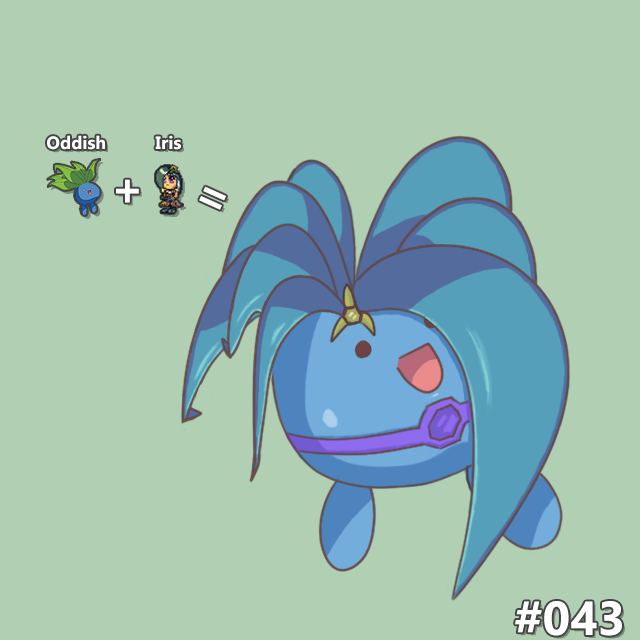
<style>
.page{position:relative;width:640px;height:640px;background:#b1d0b3}
.page>*{position:absolute;margin:0}
.t1{font:18px "Gadugi-Bold";color:#ffffff}
.t2{font:48px "Gadugi-Bold";color:#ffffff}
</style>
<div class="page">
<p class="t1" style="left:47px;top:135px;width:58px;height:15px">Oddish</p>
<p class="t1" style="left:155px;top:135px;width:26px;height:15px">Iris</p>
<p class="t2" style="left:116px;top:179px;width:23px;height:24px">+</p>
<p class="t2" style="left:199px;top:186px;width:27px;height:24px;rotate:24deg">=</p>
<p class="t2" style="left:515px;top:601px;width:107px;height:35px">#043</p>
</div>
